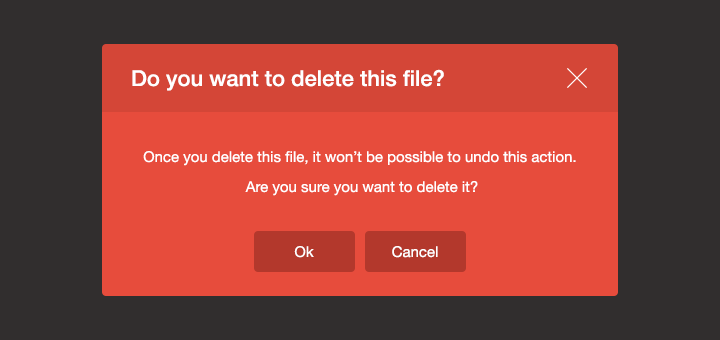
<style>
.page{position:relative;width:720px;height:340px;background:#312e2e}
.page>*{position:absolute;margin:0}
.t1{font:22px "HelveticaNeue-Medium";color:#ffffff}
.t2{font:15px/30px "HelveticaNeue";color:#ffffff}
.t3{font:15px "HelveticaNeue";color:#ffffff}
</style>
<div class="page">
<p class="t1" style="left:132px;top:69px;width:312px;height:22px">Do you want to delete this file?</p>
<p class="t2" style="left:143px;top:151px;width:433px;height:45px;text-align:center">Once you delete this file, it won’t be possible to undo this action. <br>Are you sure you want to delete it?</p>
<p class="t3" style="left:294px;top:246px;width:20px;height:12px">Ok</p>
<p class="t3" style="left:392px;top:246px;width:46px;height:12px">Cancel</p>
</div>
